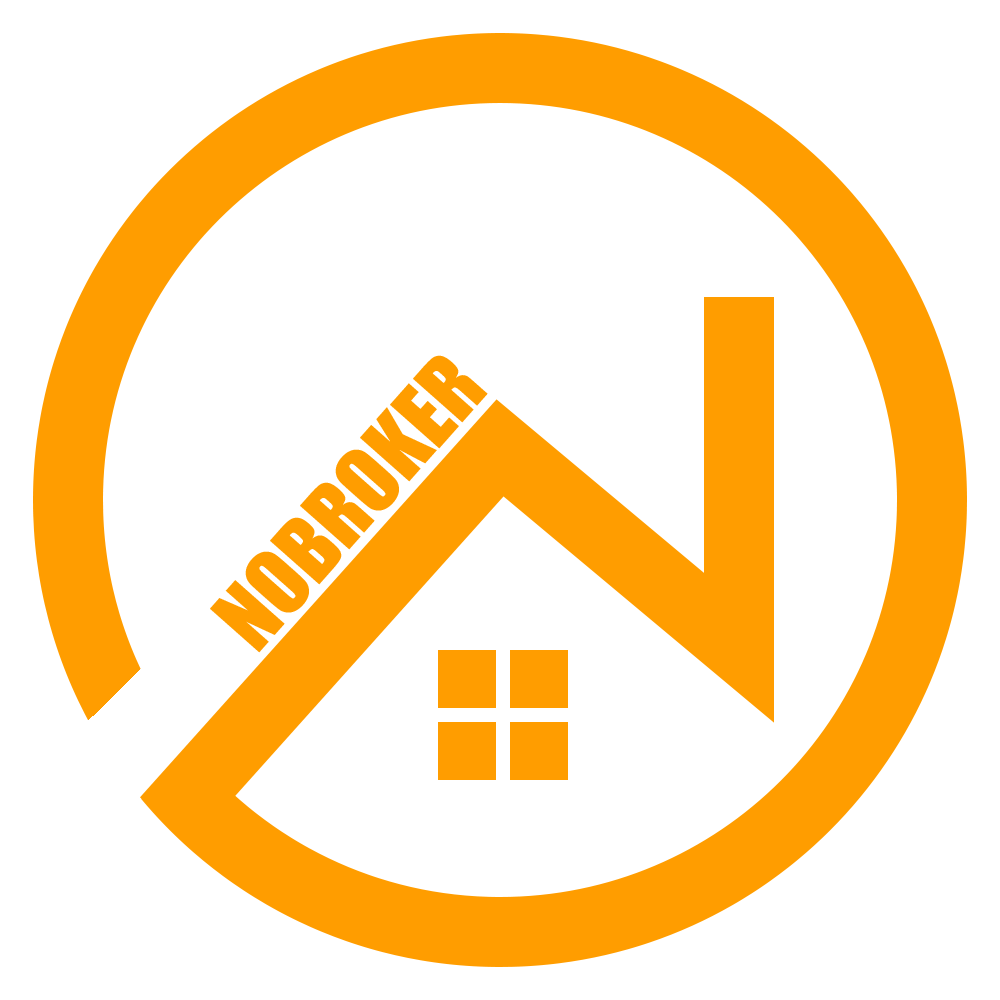
<style>
.page{position:relative;width:1000px;height:1000px;background:#ffffff}
.page>*{position:absolute;margin:0}
.t1{font:83.3px "Impact";color:#ff9d00}
</style>
<div class="page">
<p class="t1" style="left:210px;top:355px;width:278px;height:298px;rotate:-48deg">NOBROKER</p>
</div>
